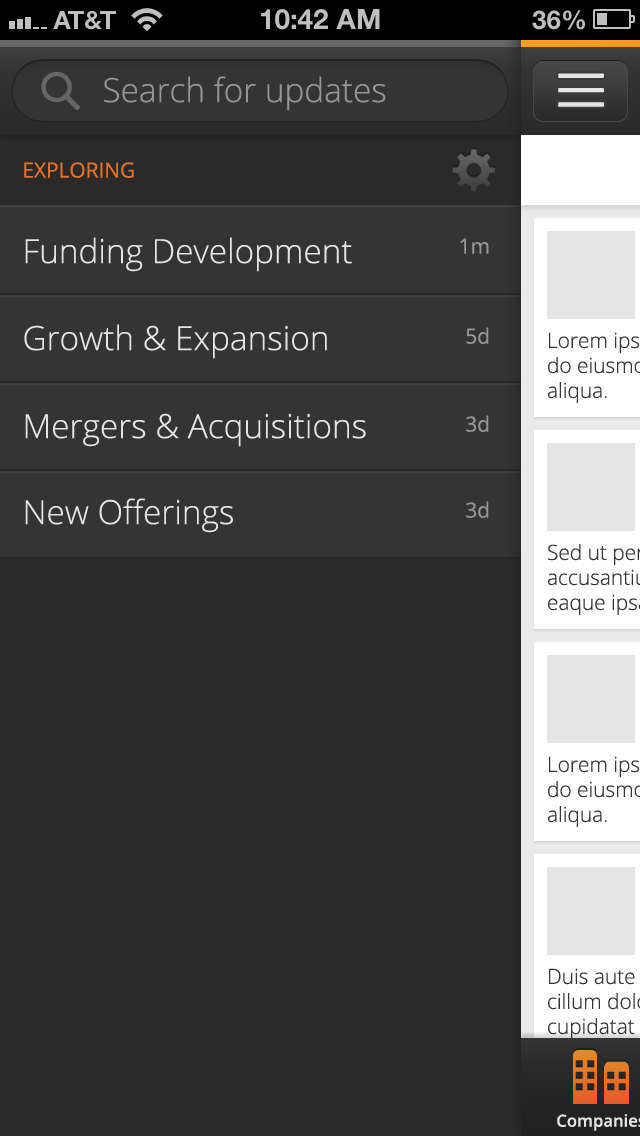
<style>
.page{position:relative;width:640px;height:1136px;background:#2a2a2a}
.page>*{position:absolute;margin:0}
.t1{font:33.3px "OpenSans-Light";color:#969696}
.t2{font:20.8px "OpenSans";color:#e57128}
.t3{font:33.3px "OpenSans-Light";color:#e5e5e5}
.t4{font:20.8px "OpenSans";color:#969696}
</style>
<div class="page">
<p class="t1" style="left:104px;top:76px;width:282px;height:35px">Search for updates</p>
<p class="t2" style="left:24px;top:162px;width:110px;height:16px">EXPLORING</p>
<p class="t3" style="left:25px;top:237px;width:327px;height:35px">Funding Development</p>
<p class="t4" style="left:460px;top:238px;width:29px;height:16px">1m</p>
<p class="t3" style="left:24px;top:324px;width:303px;height:35px">Growth &amp; Expansion</p>
<p class="t4" style="left:466px;top:327px;width:23px;height:17px">5d</p>
<p class="t3" style="left:25px;top:413px;width:341px;height:34px">Mergers &amp; Acquisitions</p>
<p class="t4" style="left:466px;top:415px;width:23px;height:17px">3d</p>
<p class="t3" style="left:25px;top:498px;width:208px;height:35px">New Offerings</p>
<p class="t4" style="left:466px;top:501px;width:23px;height:17px">3d</p>
</div>
